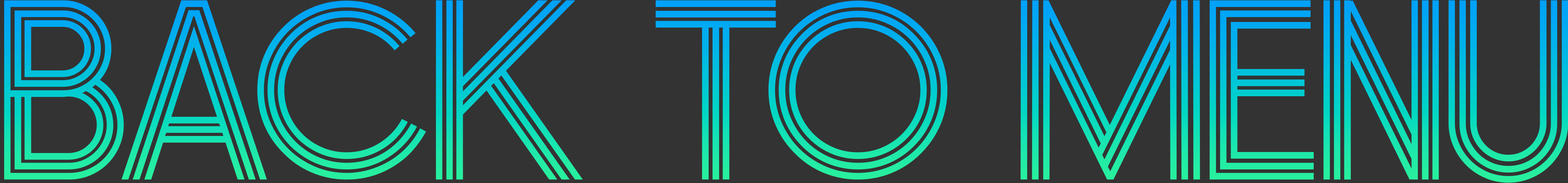
<style>
.page{position:relative;width:1568px;height:183px;background:#333333}
.page>*{position:absolute;margin:0}
.t1{font:243.2px "Summer-Blues"}
</style>
<div class="page">
<p class="t1" style="left:4px;top:0px;width:1564px;height:182px">BACK TO MENU</p>
</div>
